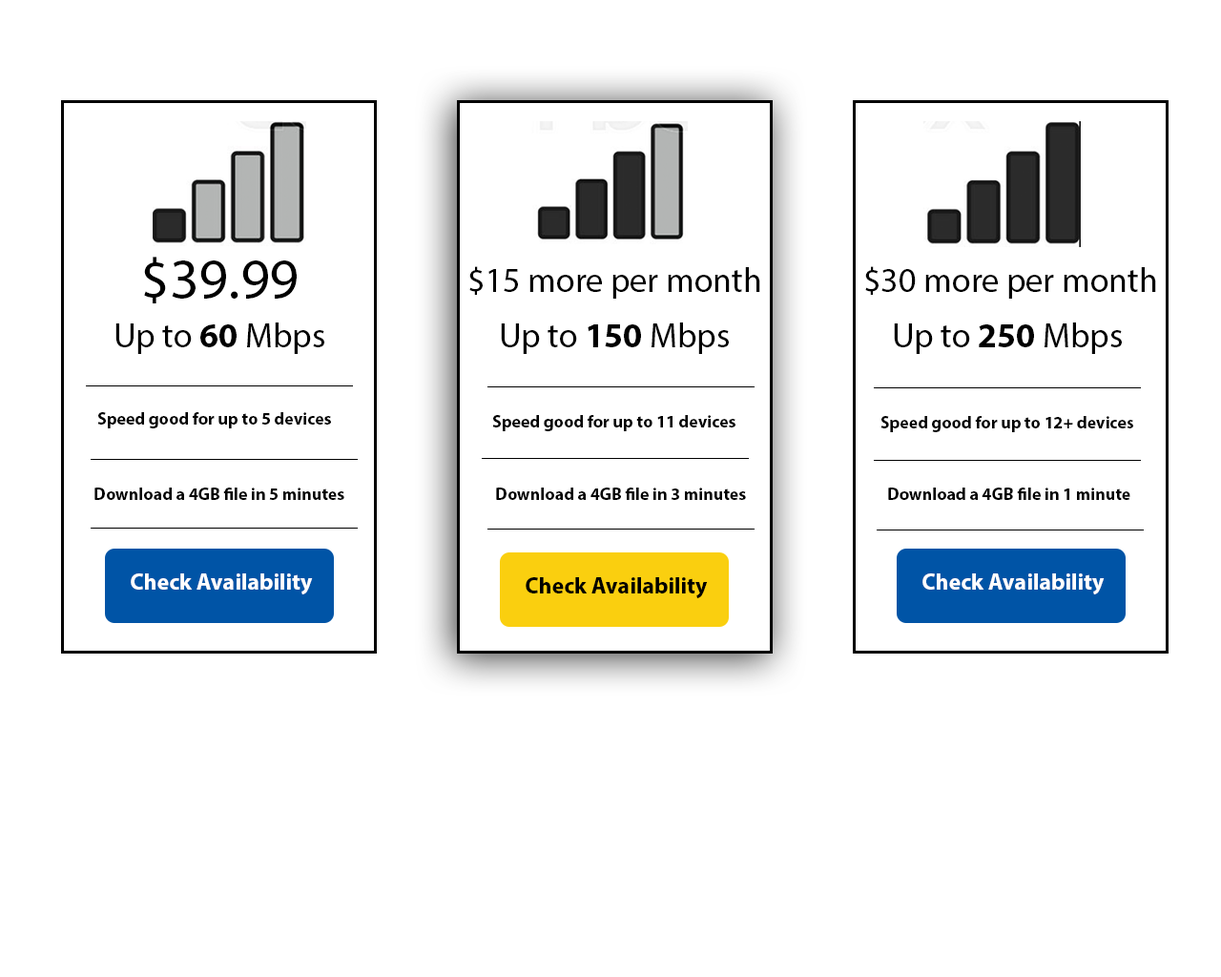
<style>
.page{position:relative;width:1221px;height:977px;background:#ffffff}
.page>*{position:absolute;margin:0}
.t1{font:57.2px "MyriadPro-Regular";color:#000000}
.t2{font:34.3px "MyriadPro-Regular";color:#000000}
.t3{font:34.3px "MyriadPro-Bold";color:#000000}
.t4{font:17.2px "MyriadPro-Bold";color:#000000}
.t5{font:22.9px "MyriadPro-Bold";color:#fffefe}
.t6{font:22.9px "MyriadPro-Bold";color:#000000}
</style>
<div class="page">
<p class="t1" style="left:144px;top:257px;width:153px;height:46px">$39.99</p>
<p class="t2" style="left:469px;top:266px;width:291px;height:33px">$15 more per month</p>
<p class="t2" style="left:865px;top:266px;width:291px;height:33px">$30 more per month</p>
<p class="t2" style="left:115px;top:322px;width:209px;height:32px">Up to <span class="t3">60</span> Mbps</p>
<p class="t2" style="left:501px;top:322px;width:228px;height:32px">Up to <span class="t3">150</span> Mbps</p>
<p class="t2" style="left:894px;top:322px;width:228px;height:32px">Up to <span class="t3">250</span> Mbps</p>
<p class="t4" style="left:97px;top:412px;width:234px;height:16px">Speed good for up to 5 devices</p>
<p class="t4" style="left:492px;top:415px;width:243px;height:16px">Speed good for up to 11 devices</p>
<p class="t4" style="left:880px;top:416px;width:253px;height:16px">Speed good for up to 12+ devices</p>
<p class="t4" style="left:94px;top:487px;width:250px;height:13px">Download a 4GB file in 5 minutes</p>
<p class="t4" style="left:496px;top:487px;width:250px;height:13px">Download a 4GB file in 3 minutes</p>
<p class="t4" style="left:888px;top:487px;width:242px;height:13px">Download a 4GB file in 1 minute</p>
<p class="t5" style="left:131px;top:573px;width:182px;height:21px">Check Availability</p>
<p class="t6" style="left:526px;top:577px;width:182px;height:21px">Check Availability</p>
<p class="t5" style="left:922px;top:573px;width:183px;height:21px">Check Availability</p>
</div>
